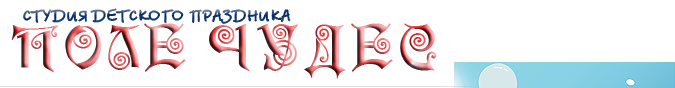
<style>
.page{position:relative;width:675px;height:88px;background:#ffffff}
.page>*{position:absolute;margin:0}
.t1{font:18px "BetinaScriptXC"}
.t2{font:48px "Edisson";letter-spacing:0.1em}
</style>
<div class="page">
<p class="t1" style="left:23px;top:8px;width:268px;height:16px">СТУДИЯ ДЕТСКОГО ПРАЗДНИКА</p>
<p class="t2" style="left:11px;top:23px;width:426px;height:56px">ПОЛЕ ЧУДЕС</p>
</div>
